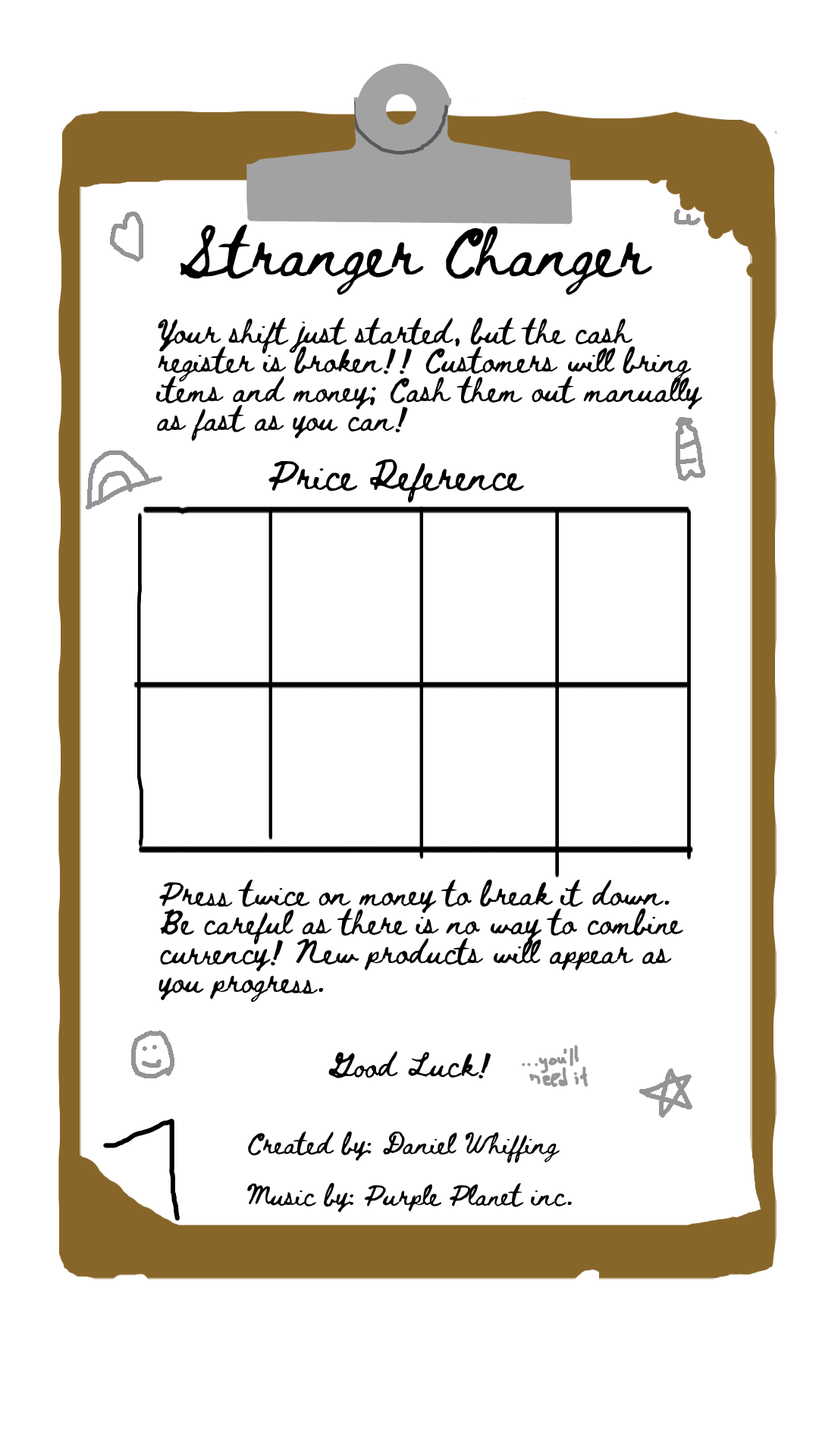
<style>
.page{position:relative;width:819px;height:1456px;background:#ffffff}
.page>*{position:absolute;margin:0}
.t1{font:48.5px "BethEllen2Regular";color:#000000}
.t2{font:24.3px "BethEllen2Regular";color:#000000}
.t3{font:30.3px "BethEllen2Regular";color:#000000}
.t4{font:21.2px "BethEllen2Regular";color:#000000}
</style>
<div class="page">
<p class="t1" style="left:180px;top:221px;width:472px;height:75px">Stranger Changer</p>
<p class="t2" style="left:155px;top:315px;width:547px;height:128px">Your shift just started, but the cash register is broken!! Customers will bring items and money; Cash them out manually as fast as you can!</p>
<p class="t3" style="left:268px;top:459px;width:256px;height:46px">Price Reference</p>
<p class="t2" style="left:158px;top:877px;width:525px;height:126px">Press twice on money to break it down. Be careful as there is no way to combine currency! New products will appear as you progress.</p>
<p class="t2" style="left:328px;top:1049px;width:163px;height:30px">Good Luck!</p>
<p class="t4" style="left:247px;top:1130px;width:325px;height:83px">Created by: Daniel Whiffing<br><br>Music by: Purple Planet inc.</p>
</div>
